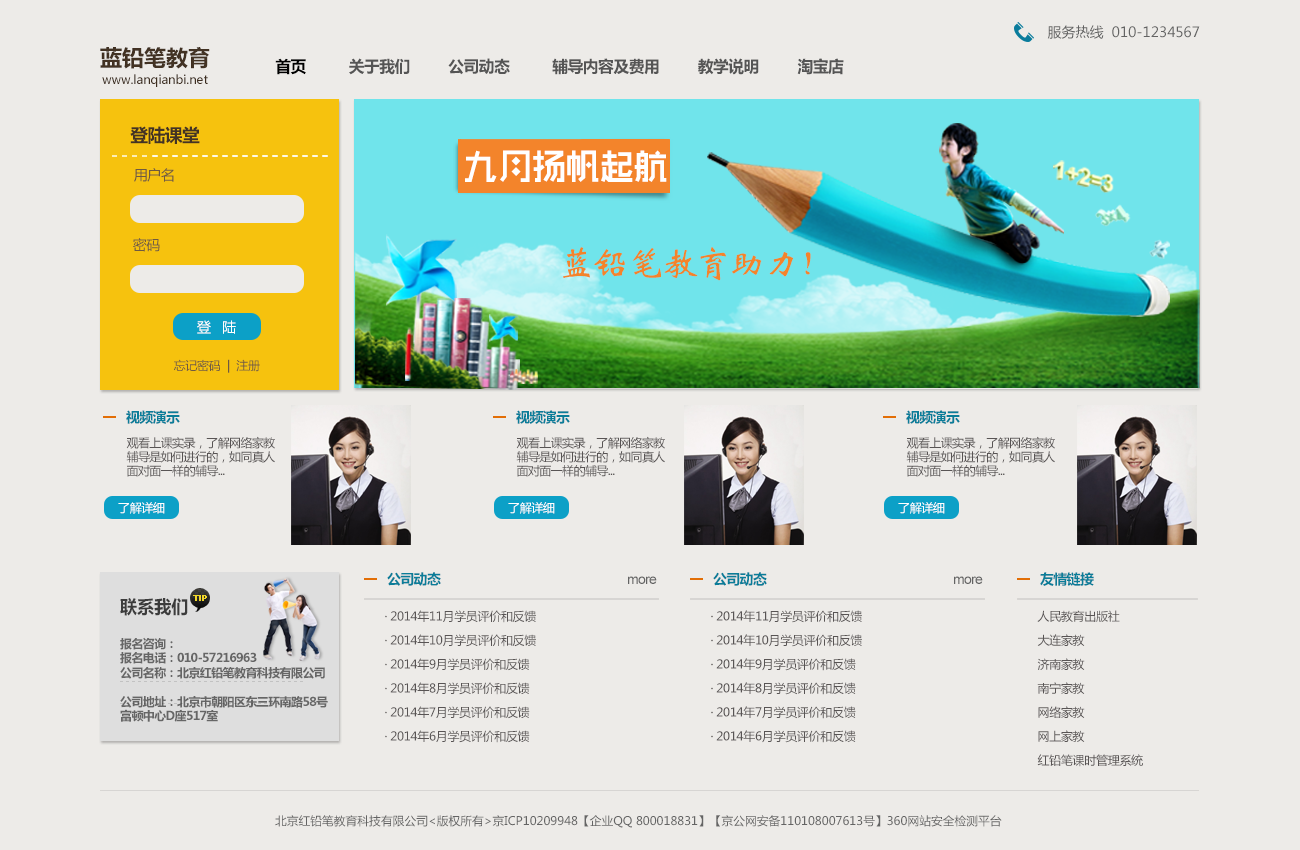
<style>
.page{position:relative;width:1300px;height:850px;background:#edebe8}
.page>*{position:absolute;margin:0}
.t1{font:14px "MicrosoftYaHei";color:#636363;text-transform:uppercase}
.t2{font:22px "MicrosoftYaHei-Bold";color:#443425;text-transform:uppercase}
.t3{font:16px "MicrosoftYaHei-Bold";letter-spacing:-0.025em;color:#555555}
.t4{font:12px "MicrosoftYaHei";color:#443425}
.t5{font:18px "MicrosoftYaHei-Bold";letter-spacing:-0.025em;color:#433324}
.t6{font:35px "RTWSShangGoG0v1-Bold";letter-spacing:-0.03em;color:#ffffff}
.t7{font:14px "MicrosoftYaHei";letter-spacing:-0.025em;color:#6f5a40}
.t8{font:36px "STXinwei";letter-spacing:-0.05em;color:#f3842b}
.t9{font:14px "MicrosoftYaHei";letter-spacing:-0.025em;color:#ffffff}
.t10{font:12px "MicrosoftYaHei";letter-spacing:-0.025em;color:#6f5a40}
.t11{font:14px "MicrosoftYaHei-Bold";letter-spacing:-0.05em;color:#0a7d99}
.t12{font:12px "MicrosoftYaHei";letter-spacing:-0.05em;color:#585454}
.t13{font:12px "MicrosoftYaHei";letter-spacing:-0.025em;color:#ffffff}
.t14{font:14px "ArialMT";letter-spacing:-0.05em;color:#636363}
.t15{font:18px "MicrosoftYaHei-Bold";color:#3c3c3c;text-transform:uppercase;scale:0.95 1}
.t16{font:8px "MyriadPro-Regular";letter-spacing:0.025em;color:#f1d72a;text-transform:uppercase;font-weight:bold}
.t17{font:12px/24px "MicrosoftYaHei";letter-spacing:-0.025em;color:#585454}
.t18{font:12px "MicrosoftYaHei-Bold";letter-spacing:-0.05em;color:#666666}
.t19{font:11.7px "MicrosoftYaHei";color:#646464;text-transform:uppercase}
</style>
<div class="page">
<p class="t1" style="left:1047px;top:25px;width:153px;height:14px">服务热线  010-1234567</p>
<p class="t2" style="left:100px;top:47px;width:110px;height:22px">蓝铅笔教育</p>
<p class="t3" style="left:275px;top:58px;width:569px;height:17px">首页          关于我们         公司动态          辅导内容及费用         教学说明         淘宝店</p>
<p class="t4" style="left:102px;top:74px;width:106px;height:13px">www.lanqianbi.net</p>
<p class="t5" style="left:130px;top:126px;width:70px;height:18px">登陆课堂</p>
<p class="t6" style="left:465px;top:150px;width:202px;height:32px">九月扬帆起航</p>
<p class="t7" style="left:134px;top:168px;width:40px;height:14px">用户名</p>
<p class="t7" style="left:133px;top:238px;width:27px;height:14px">密码</p>
<p class="t8" style="left:563px;top:247px;width:248px;height:34px">蓝铅笔教育助力！</p>
<p class="t9" style="left:197px;top:320px;width:39px;height:14px">登   陆</p>
<p class="t10" style="left:174px;top:359px;width:86px;height:14px">忘记密码  |  注册</p>
<p class="t11" style="left:126px;top:410px;width:54px;height:14px">视频演示</p>
<p class="t11" style="left:516px;top:410px;width:54px;height:14px">视频演示</p>
<p class="t11" style="left:906px;top:410px;width:54px;height:14px">视频演示</p>
<p class="t12" style="left:126px;top:436px;width:149px;height:41px">观看上课实录，了解网络家教辅导是如何进行的，如同真人面对面一样的辅导...</p>
<p class="t12" style="left:516px;top:436px;width:149px;height:41px">观看上课实录，了解网络家教辅导是如何进行的，如同真人面对面一样的辅导...</p>
<p class="t12" style="left:906px;top:436px;width:149px;height:41px">观看上课实录，了解网络家教辅导是如何进行的，如同真人面对面一样的辅导...</p>
<p class="t13" style="left:118px;top:502px;width:47px;height:12px">了解详细</p>
<p class="t13" style="left:508px;top:502px;width:47px;height:12px">了解详细</p>
<p class="t13" style="left:898px;top:502px;width:47px;height:12px">了解详细</p>
<p class="t11" style="left:387px;top:572px;width:54px;height:14px">公司动态</p>
<p class="t14" style="left:628px;top:576px;width:29px;height:8px">more</p>
<p class="t11" style="left:713px;top:572px;width:54px;height:14px">公司动态</p>
<p class="t14" style="left:954px;top:576px;width:29px;height:8px">more</p>
<p class="t11" style="left:1040px;top:572px;width:54px;height:14px">友情链接</p>
<p class="t15" style="left:120px;top:598px;width:68px;height:18px">联系我们</p>
<p class="t16" style="left:193px;top:595px;width:14px;height:6px">tip</p>
<p class="t17" style="left:385px;top:610px;width:151px;height:133px">· 2014年11月学员评价和反馈<br>· 2014年10月学员评价和反馈<br>· 2014年9月学员评价和反馈<br>· 2014年8月学员评价和反馈<br>· 2014年7月学员评价和反馈<br>· 2014年6月学员评价和反馈</p>
<p class="t17" style="left:711px;top:610px;width:151px;height:133px">· 2014年11月学员评价和反馈<br>· 2014年10月学员评价和反馈<br>· 2014年9月学员评价和反馈<br>· 2014年8月学员评价和反馈<br>· 2014年7月学员评价和反馈<br>· 2014年6月学员评价和反馈</p>
<p class="t17" style="left:1037px;top:610px;width:106px;height:157px">人民教育出版社<br>大连家教<br>济南家教<br>南宁家教<br>网络家教<br>网上家教<br>红铅笔课时管理系统</p>
<p class="t18" style="left:120px;top:637px;width:208px;height:85px">报名咨询： <br>报名电话：010-57216963<br>公司名称：北京红铅笔教育科技有限公司<br> <br>公司地址：北京市朝阳区东三环南路58号<br>富顿中心D座517室</p>
<p class="t19" style="left:275px;top:815px;width:727px;height:13px">北京红铅笔教育科技有限公司&lt;版权所有&gt;京ICP10209948【企业QQ 800018831】【京公网安备110108007613号】360网站安全检测平台</p>
</div>
